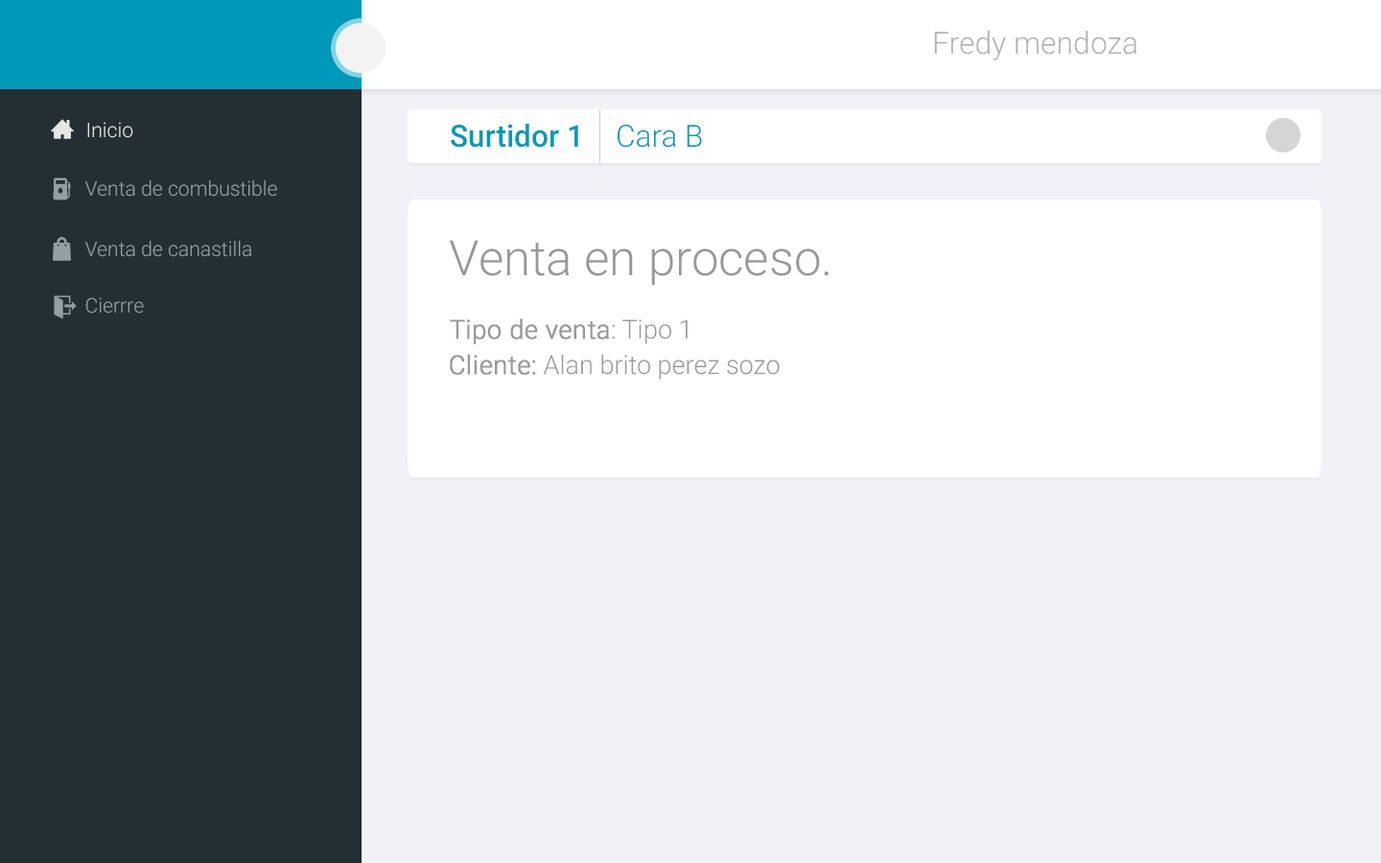
<style>
.page{position:relative;width:1381px;height:863px;background:#f1f2f7}
.page>*{position:absolute;margin:0}
.t1{font:30.7px "Roboto-Light";color:#b4b1b1}
.t2{font:20.3px "Roboto-Light";color:#e8e6e2}
.t3{font:30.7px "Roboto-Medium";color:#0099b9}
.t4{font:30.7px "Roboto-Light";color:#0099b9}
.t5{font:20.3px "Roboto-Light";color:#939fa7}
.t6{font:48.9px "Roboto-Light";color:#989898}
.t7{font:26.1px "Roboto-Light";color:#989898;font-weight:bold}
.t8{font:26.1px "Roboto-Light";color:#989898}
</style>
<div class="page">
<p class="t1" style="left:934px;top:31px;width:203px;height:29px">Fredy mendoza</p>
<p class="t2" style="left:87px;top:122px;width:46px;height:16px">Inicio</p>
<p class="t3" style="left:451px;top:124px;width:127px;height:24px">Surtidor 1</p>
<p class="t4" style="left:618px;top:125px;width:84px;height:23px">Cara B</p>
<p class="t5" style="left:85px;top:180px;width:192px;height:17px">Venta de combustible</p>
<p class="t5" style="left:85px;top:241px;width:166px;height:16px">Venta de canastilla</p>
<p class="t6" style="left:449px;top:240px;width:380px;height:46px">Venta en proceso.</p>
<p class="t5" style="left:85px;top:297px;width:59px;height:17px">Cierrre</p>
<p class="t7" style="left:450px;top:318px;width:238px;height:26px">Tipo de venta<span class="t8">: Tipo 1</span></p>
<p class="t8" style="left:450px;top:354px;width:330px;height:26px"><span class="t7">Cliente:</span> Alan brito perez sozo</p>
</div>
